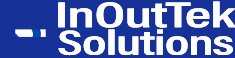
<style>
.page{position:relative;width:235px;height:58px;background:#163299}
.page>*{position:absolute;margin:0}
.t1{font:36.4px "AcuminConcept-CondensedSemibold";letter-spacing:-0.005em;color:#ffffff;scale:1.7 1}
.t2{font:35.4px "AcuminConcept-CondensedSemibold";letter-spacing:-0.005em;color:#ffffff;scale:1.58 1}
</style>
<div class="page">
<p class="t1" style="left:58px;top:1px;width:178px;height:27px">InOutTek</p>
<p class="t1" style="left:58px;top:1px;width:178px;height:27px">InOutTek</p>
<p class="t2" style="left:58px;top:29px;width:175px;height:27px">Solutions</p>
<p class="t2" style="left:58px;top:29px;width:175px;height:27px">Solutions</p>
</div>
